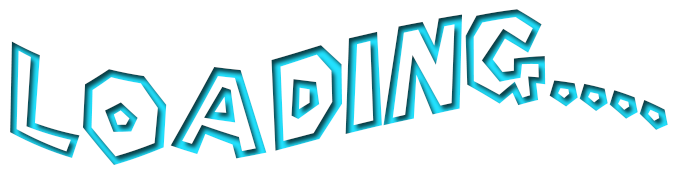
<style>
.page{position:relative;width:680px;height:176px;background:#ffffff}
.page>*{position:absolute;margin:0}
.t1{font:120px "Super-Mario-Bros.-Regular"}
</style>
<div class="page">
<p class="t1" style="left:10px;top:9px;width:658px;height:156px">Loading....</p>
</div>
